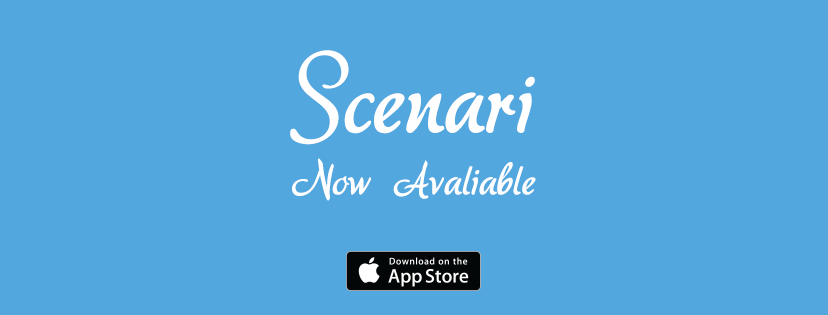
<style>
.page{position:relative;width:828px;height:315px;background:#52a7df}
.page>*{position:absolute;margin:0}
.t1{font:100px "akaDora";color:#ffffff}
.t2{font:44px "akaDora";color:#ffffff}
</style>
<div class="page">
<p class="t1" style="left:290px;top:50px;width:245px;height:95px">Scenari</p>
<p class="t2" style="left:292px;top:158px;width:244px;height:43px">Now Avaliable</p>
</div>
